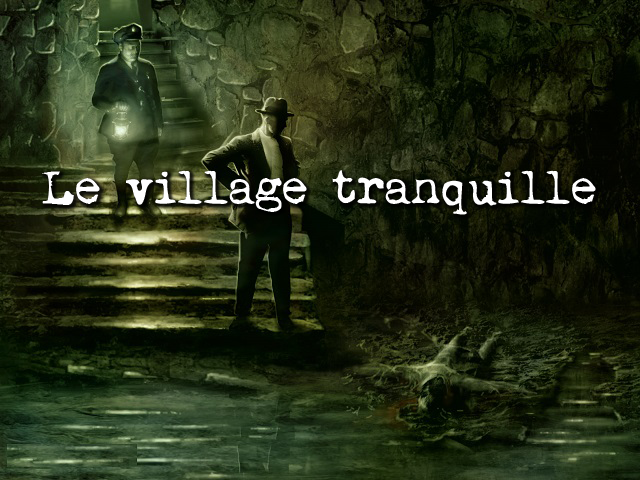
<style>
.page{position:relative;width:640px;height:480px}
.page>*{position:absolute;margin:0}
.t1{font:48px "MyUnderwood";color:#ffffff}
</style>
<div class="page">
<p class="t1" style="left:42px;top:170px;width:554px;height:45px">Le village tranquille</p>
</div>
